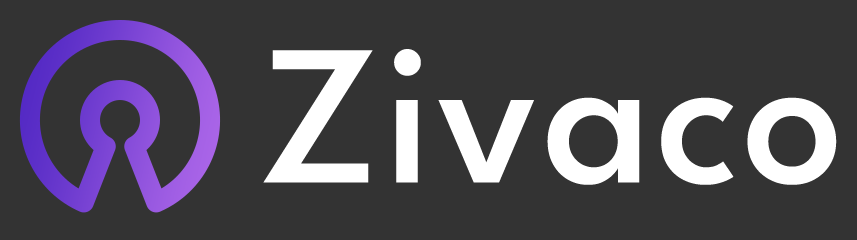
<style>
.page{position:relative;width:857px;height:240px;background:#333333}
.page>*{position:absolute;margin:0}
.t1{font:200px "LeagueSpartan-Medium";letter-spacing:0.02em;color:#ffffff}
</style>
<div class="page">
<p class="t1" style="left:263px;top:49px;width:574px;height:136px">Zivaco</p>
</div>
